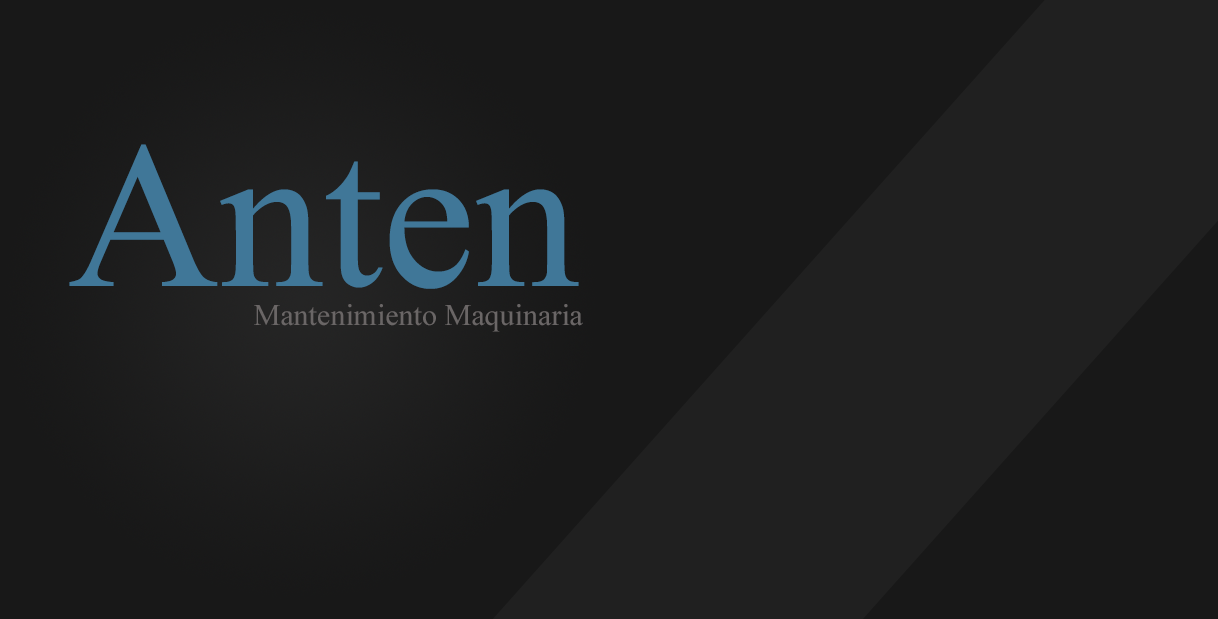
<style>
.page{position:relative;width:1218px;height:619px;background:#181818}
.page>*{position:absolute;margin:0}
.t1{font:209px "TimesNewRomanPSMT";color:#407798}
.t2{font:30px "TimesNewRomanPSMT";color:#6a6666}
</style>
<div class="page">
<p class="t1" style="left:69px;top:144px;width:510px;height:145px">Anten</p>
<p class="t2" style="left:254px;top:304px;width:329px;height:28px">Mantenimiento Maquinaria</p>
</div>
